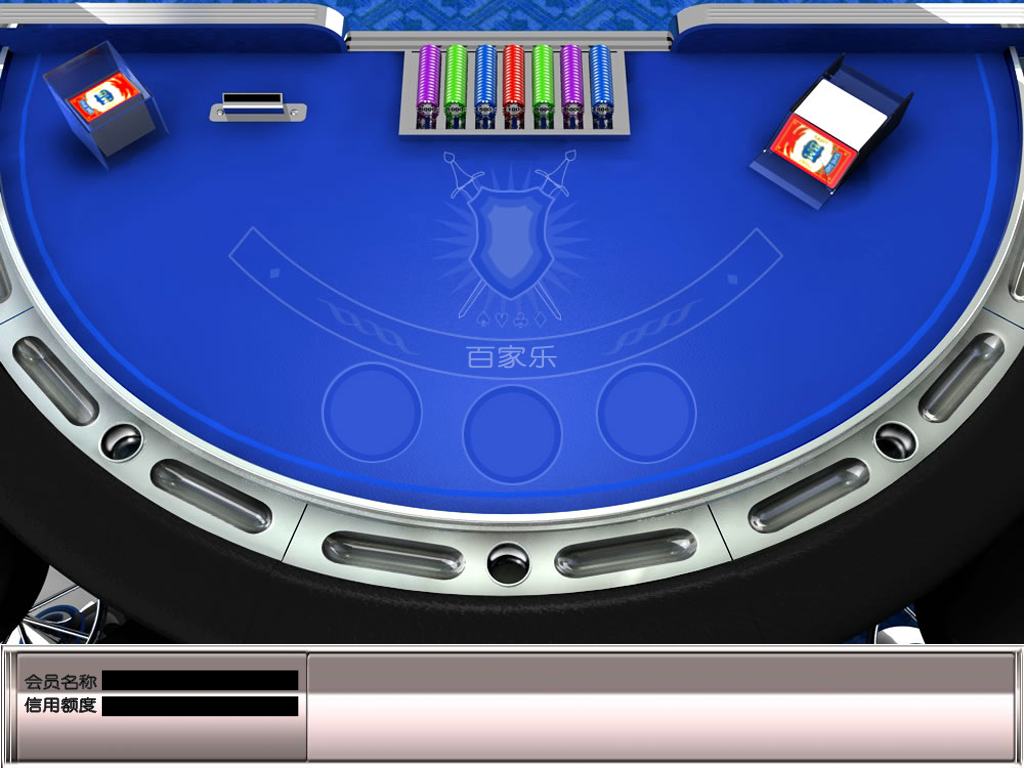
<style>
.page{position:relative;width:1024px;height:768px}
.page>*{position:absolute;margin:0}
.t1{font:24px "YouYuan";color:#8198e7;font-weight:bold;scale:1.26 1}
.t2{font:15.5px "YouYuan";color:#151515;font-weight:bold;scale:1.14 1}
.t3{font:15.5px "YouYuan";color:#191919;font-weight:bold;scale:1.14 1}
</style>
<div class="page">
<p class="t1" style="left:466px;top:344px;width:91px;height:25px">百家乐</p>
<p class="t2" style="left:24px;top:674px;width:73px;height:16px">会员名称</p>
<p class="t3" style="left:24px;top:697px;width:73px;height:16px">信用额度</p>
</div>
